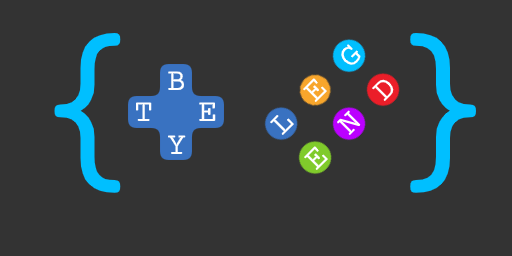
<style>
.page{position:relative;width:512px;height:256px;background:#333333}
.page>*{position:absolute;margin:0}
.t1{font:192px "CourierPrime";color:#00bfff}
.t2{font:32px "CourierPrime";color:#ffffff}
</style>
<div class="page">
<p class="t1" style="left:54px;top:33px;width:423px;height:160px">{  }</p>
<p class="t2" style="left:341px;top:44px;width:20px;height:21px;rotate:-45deg">G</p>
<p class="t2" style="left:168px;top:71px;width:17px;height:19px">B</p>
<p class="t2" style="left:303px;top:78px;width:24px;height:24px;rotate:-45deg">E</p>
<p class="t2" style="left:372px;top:79px;width:22px;height:22px;rotate:-45deg">D</p>
<p class="t2" style="left:135px;top:102px;width:17px;height:19px">T</p>
<p class="t2" style="left:199px;top:102px;width:17px;height:19px">E</p>
<p class="t2" style="left:336px;top:110px;width:25px;height:25px;rotate:-45deg">N</p>
<p class="t2" style="left:270px;top:115px;width:24px;height:20px;rotate:-45deg">L</p>
<p class="t2" style="left:167px;top:135px;width:19px;height:19px">Y</p>
<p class="t2" style="left:304px;top:146px;width:24px;height:24px;rotate:-45deg">E</p>
</div>
